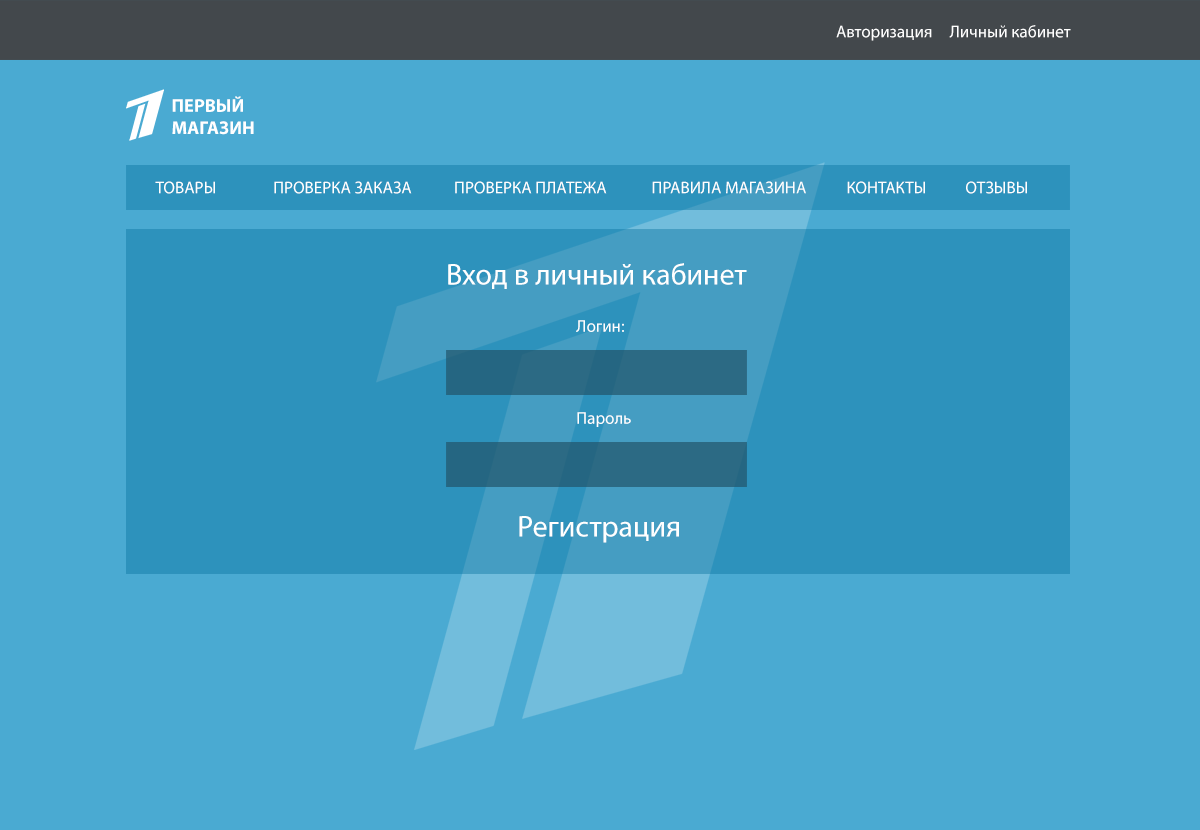
<style>
.page{position:relative;width:1200px;height:830px;background:#4aaad2}
.page>*{position:absolute;margin:0}
.t1{font:17px "MyriadPro-Regular";color:#ffffff}
.t2{font:18.5px "MyriadPro-Bold";color:#ffffff;text-transform:uppercase}
.t3{font:30px "MyriadPro-Regular";color:#ffffff}
</style>
<div class="page">
<p class="t1" style="left:836px;top:25px;width:96px;height:16px">Авторизация</p>
<p class="t1" style="left:949px;top:25px;width:122px;height:13px">Личный кабинет</p>
<p class="t2" style="left:172px;top:96px;width:82px;height:39px">Первый <br>магазин</p>
<p class="t1" style="left:155px;top:181px;width:60px;height:13px">ТОВАРЫ</p>
<p class="t1" style="left:274px;top:181px;width:138px;height:13px">ПРОВЕРКА ЗАКАЗА</p>
<p class="t1" style="left:455px;top:181px;width:152px;height:13px">ПРОВЕРКА ПЛАТЕЖА</p>
<p class="t1" style="left:652px;top:181px;width:154px;height:13px">ПРАВИЛА МАГАЗИНА</p>
<p class="t1" style="left:847px;top:181px;width:78px;height:13px">КОНТАКТЫ</p>
<p class="t1" style="left:966px;top:181px;width:61px;height:13px">ОТЗЫВЫ</p>
<p class="t3" style="left:448px;top:263px;width:299px;height:26px">Вход в личный кабинет</p>
<p class="t1" style="left:576px;top:320px;width:48px;height:12px">Логин:</p>
<p class="t1" style="left:577px;top:412px;width:54px;height:15px">Пароль</p>
<p class="t3" style="left:519px;top:516px;width:160px;height:27px">Регистрация</p>
</div>
